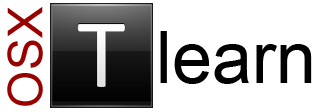
<style>
.page{position:relative;width:329px;height:112px;background:#ffffff}
.page>*{position:absolute;margin:0}
.t1{font:48px "ArialMT";color:#990000}
.t2{font:72px "ArialMT";color:#000000}
</style>
<div class="page">
<p class="t1" style="left:7px;top:7px;width:36px;height:99px;rotate:-90deg">OSX</p>
<p class="t2" style="left:160px;top:31px;width:152px;height:53px">learn</p>
</div>
